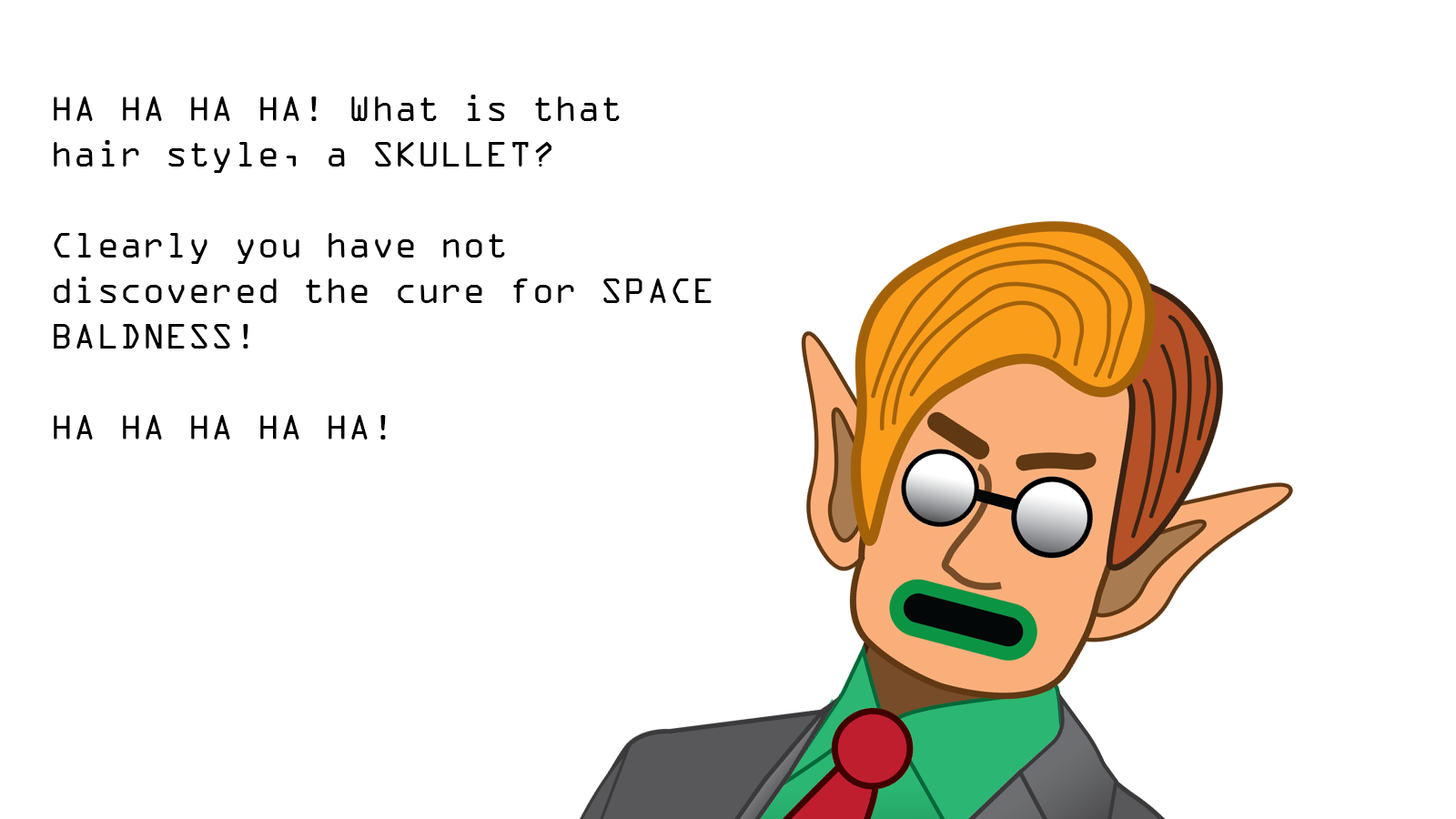
<style>
.page{position:relative;width:1456px;height:819px;background:#ffffff}
.page>*{position:absolute;margin:0}
.t1{font:37.9px "OCRAExtended";color:#000000}
</style>
<div class="page">
<p class="t1" style="left:54px;top:95px;width:658px;height:345px">HA HA HA HA! What is that hair style, a SKULLET?<br><br>Clearly you have not discovered the cure for SPACE BALDNESS!<br><br>HA HA HA HA HA!</p>
</div>
